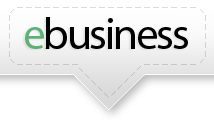
<style>
.page{position:relative;width:214px;height:126px;background:#ffffff}
.page>*{position:absolute;margin:0}
.t1{font:45px "MyriadPro-Regular";letter-spacing:-0.05em;color:#000000}
.t2{font:45px "MyriadPro-Regular";letter-spacing:-0.05em;color:#5db176}
</style>
<div class="page">
<p class="t1" style="left:25px;top:17px;width:163px;height:32px"><span class="t2">e</span>business</p>
</div>
